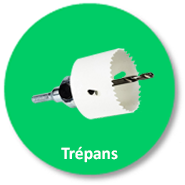
<style>
.page{position:relative;width:185px;height:185px;background:#00cc66}
.page>*{position:absolute;margin:0}
.t1{font:17.8px "Calibri-Bold";color:#ffffff}
</style>
<div class="page">
<p class="t1" style="left:61px;top:146px;width:57px;height:17px">Trépans</p>
</div>
